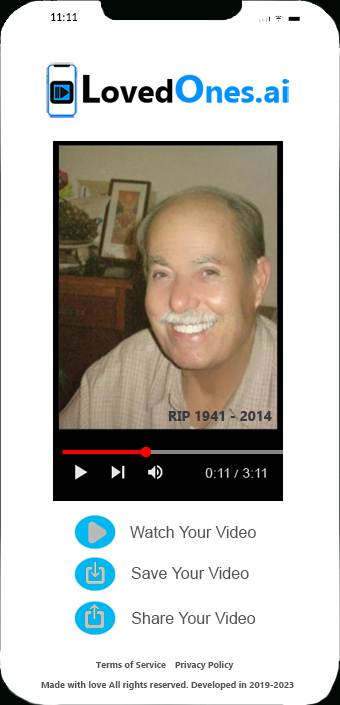
<style>
.page{position:relative;width:340px;height:705px;background:#ffffff}
.page>*{position:absolute;margin:0}
.t1{font:12px "Carlito";color:#000000}
.t2{font:16px "ArialMT";color:#525556}
.t3{font:9px "Ebrima-Bold";color:#525556}
</style>
<div class="page">
<p class="t1" style="left:50px;top:13px;width:28px;height:8px">11:11</p>
<p class="t2" style="left:130px;top:526px;width:126px;height:12px">Watch Your Video</p>
<p class="t2" style="left:131px;top:567px;width:118px;height:12px">Save Your Video</p>
<p class="t2" style="left:132px;top:612px;width:124px;height:12px">Share Your Video</p>
<p class="t3" style="left:96px;top:661px;width:70px;height:7px">Terms of Service</p>
<p class="t3" style="left:175px;top:661px;width:59px;height:9px">Privacy Policy</p>
<p class="t3" style="left:41px;top:681px;width:253px;height:9px">Made with love All rights reserved. Developed in 2019-2023</p>
</div>
